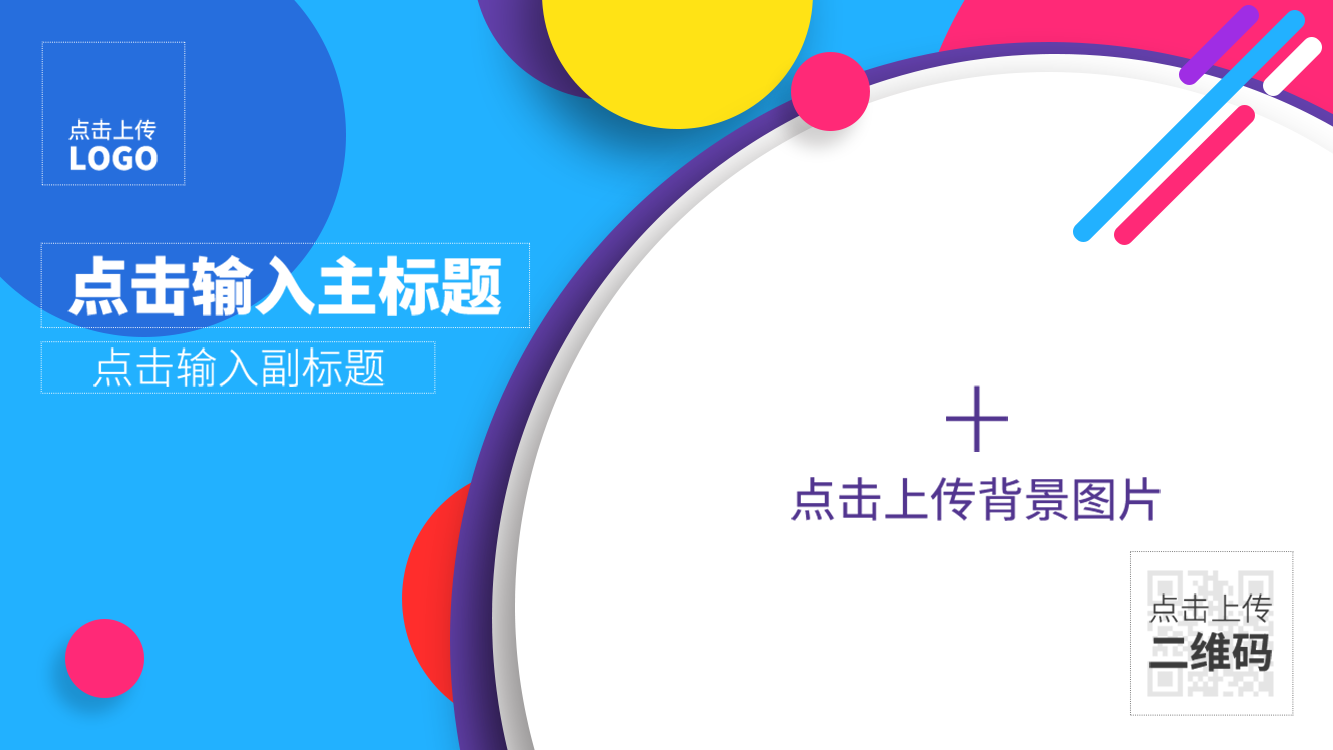
<style>
.page{position:relative;width:1333px;height:750px;background:#ffffff}
.page>*{position:absolute;margin:0}
.t1{font:22.1px/35.9px "SourceHanSansCN-Regular";color:#ffffff}
.t2{font:31.1px/13.8px "SourceHanSansCN-Heavy";color:#ffffff}
.t3{font:62.4px "SourceHanSansCN-Heavy";color:#ffffff}
.t4{font:41.7px "SourceHanSansCN-Light";color:#ffffff}
.t5{font:134.6px "SourceHanSansCN-ExtraLight";color:#52358f}
.t6{font:46.9px "SourceHanSansCN-Regular";color:#52358f}
.t7{font:31.1px/18.7px "SourceHanSansCN-Light";color:#3b3b3b}
.t8{font:41.9px/30.7px "SourceHanSansCN-Bold";color:#3b3b3b}
</style>
<div class="page">
<p class="t1" style="left:68px;top:118px;width:90px;height:53px;text-align:justify">点击上传<br><span class="t2">LOGO</span></p>
<p class="t3" style="left:67px;top:255px;width:435px;height:61px">点击输入主标题</p>
<p class="t4" style="left:93px;top:347px;width:292px;height:40px">点击输入副标题</p>
<p class="t5" style="left:946px;top:385px;width:62px;height:67px">+</p>
<p class="t6" style="left:791px;top:477px;width:370px;height:44px">点击上传背景图片</p>
<p class="t7" style="left:1149px;top:593px;width:123px;height:79px;text-align:center">点击上传<br><span class="t8">二维码</span></p>
</div>
